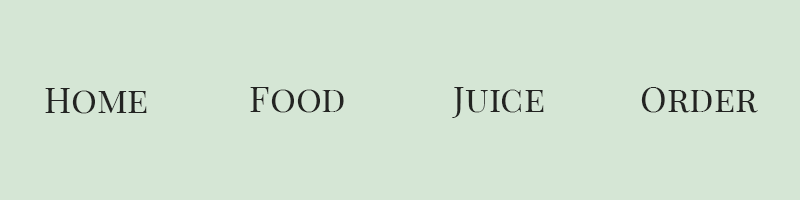
<style>
.page{position:relative;width:800px;height:200px;background:#d5e6d5}
.page>*{position:absolute;margin:0}
.t1{font:36px "PlayfairDisplay-Regular";color:#232422;font-variant:small-caps}
</style>
<div class="page">
<p class="t1" style="left:45px;top:88px;width:102px;height:26px">Home</p>
<p class="t1" style="left:250px;top:87px;width:94px;height:26px">Food</p>
<p class="t1" style="left:452px;top:87px;width:92px;height:31px">Juice</p>
<p class="t1" style="left:641px;top:87px;width:117px;height:26px">Order</p>
</div>
